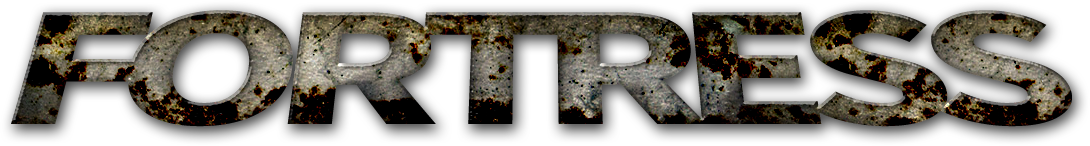
<style>
.page{position:relative;width:1090px;height:146px}
.page>*{position:absolute;margin:0}
.t1{font:150px "Keifont";letter-spacing:-0.1em;scale:1.6 1}
</style>
<div class="page">
<p class="t1" style="left:11px;top:10px;width:1061px;height:117px">FORTRESS</p>
</div>
